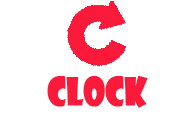
<style>
.page{position:relative;width:189px;height:113px;background:#ffffff}
.page>*{position:absolute;margin:0}
.t1{font:36.8px "ShowcardGothic-Reg";color:#fc1a3a;font-weight:bold;scale:0.83 1}
</style>
<div class="page">
<p class="t1" style="left:47px;top:76px;width:101px;height:32px">clock</p>
</div>
